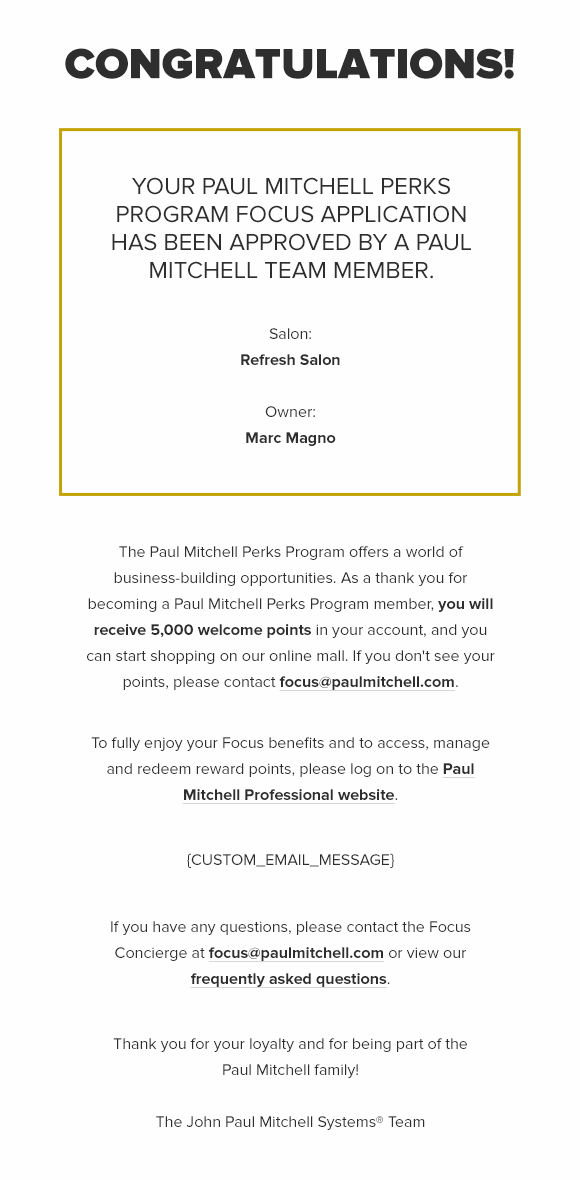
<style>
.page{position:relative;width:580px;height:1180px;background:#fffefe}
.page>*{position:absolute;margin:0}
.t1{font:44px "ProximaNova-Black";color:#2e2e2e;text-transform:uppercase}
.t2{font:24px/28px "ProximaNova-Regular";color:#2e2e2e;text-transform:uppercase}
.t3{font:16px/26px "ProximaNova-Bold";color:#2e2e2e}
.t4{font:16px/26px "ProximaNova-Regular";color:#2e2e2e}
.t5{font:16px/26px "ProximaNova-Bold";color:#2e2e2e;text-decoration:underline}
.t6{font:16px "ProximaNova-Regular";color:#2e2e2e}
</style>
<div class="page">
<p class="t1" style="left:65px;top:48px;width:449px;height:31px">Congratulations!</p>
<p class="t2" style="left:112px;top:177px;width:359px;height:102px;text-align:center">Your Paul Mitchell Perks Program Focus application has been approved by a Paul Mitchell team member.</p>
<p class="t3" style="left:241px;top:328px;width:99px;height:118px;text-align:center"><span class="t4">Salon:<br></span>Refresh Salon<br><span class="t4"><br>Owner:<br></span>Marc Magno</p>
<p class="t4" style="left:87px;top:546px;width:408px;height:145px;text-align:center">The Paul Mitchell Perks Program offers a world of business-building opportunities. As a thank you for becoming a Paul Mitchell Perks Program member, <span class="t3">you will receive 5,000 welcome points </span>in your account, and you can start shopping on our online mall. If you don't see your points, please contact <span class="t5">focus@paulmitchell.com</span>.</p>
<p class="t4" style="left:91px;top:737px;width:399px;height:67px;text-align:center">To fully enjoy your Focus benefits and to access, manage and redeem reward points, please log on to the <span class="t5">Paul Mitchell Professional website</span>.</p>
<p class="t6" style="left:187px;top:853px;width:207px;height:15px">{CUSTOM_EMAIL_MESSAGE}</p>
<p class="t4" style="left:111px;top:921px;width:360px;height:67px;text-align:center">If you have any questions, please contact the Focus Concierge at <span class="t5">focus@paulmitchell.com</span> or view our <span class="t5">frequently asked questions</span>.</p>
<p class="t4" style="left:113px;top:1038px;width:354px;height:92px;text-align:center">Thank you for your loyalty and for being part of the Paul Mitchell family!<br><br>The John Paul Mitchell Systems® Team</p>
</div>
